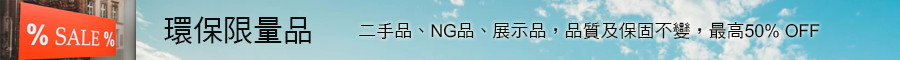
<style>
.page{position:relative;width:900px;height:60px}
.page>*{position:absolute;margin:0}
.t1{font:30px "DFHei-Md-HKP-BF";color:#0a0c0c}
.t2{font:18px "DFHei-Md-HKP-BF";color:#0a0c0c}
</style>
<div class="page">
<p class="t1" style="left:164px;top:16px;width:147px;height:29px">環保限量品</p>
<p class="t2" style="left:359px;top:22px;width:461px;height:18px">二手品、NG品、展示品，品質及保固不變，最高50% OFF</p>
</div>
